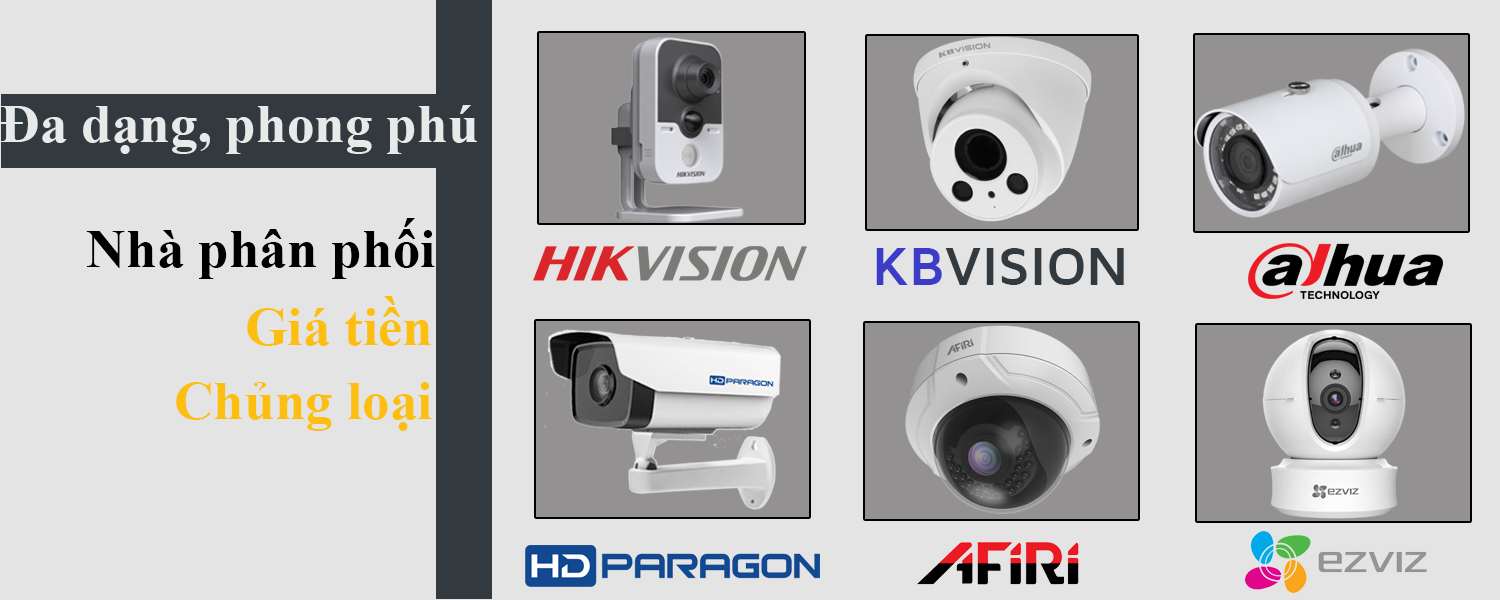
<style>
.page{position:relative;width:1500px;height:600px;background:#e4e4e4}
.page>*{position:absolute;margin:0}
.t1{font:55px "TimesNewRomanPS-BoldMT";color:#e8e9e9}
.t2{font:55.2px "TimesNewRomanPS-BoldMT";color:#000000}
.t3{font:54.6px "MavenProBold";color:#32393f}
.t4{font:54.6px "MavenProBold";color:#3c3cc9}
.t5{font:55.2px "TimesNewRomanPS-BoldMT";color:#fcbf10}
</style>
<div class="page">
<p class="t1" style="left:0px;top:105px;width:477px;height:49px">Đa dạng, phong phú</p>
<p class="t2" style="left:86px;top:218px;width:349px;height:61px">Nhà phân phối</p>
<p class="t3" style="left:876px;top:248px;width:248px;height:37px"><span class="t4">KB</span>VISION</p>
<p class="t5" style="left:247px;top:296px;width:184px;height:50px">Giá tiền</p>
<p class="t5" style="left:176px;top:382px;width:256px;height:49px">Chủng loại</p>
</div>
